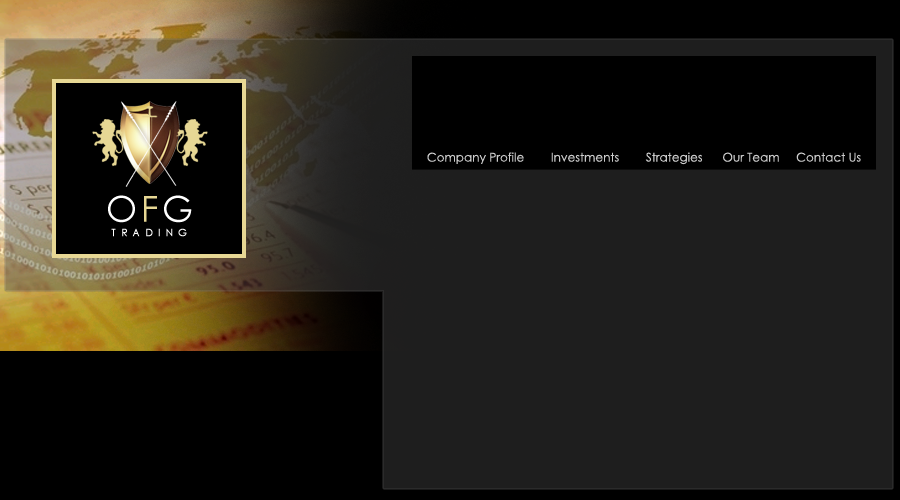
<style>
.page{position:relative;width:900px;height:500px;background:#1e1e1e}
.page>*{position:absolute;margin:0}
.t1{font:12px "CenturyGothic";color:#cccccc}
.t2{font:36px "CenturyGothic";letter-spacing:0.1em;color:#ffffff}
.t3{font:36px "CenturyGothic";letter-spacing:0.1em;color:#e7d794}
.t4{font:10px "CenturyGothic";letter-spacing:0.5em;color:#ffffff;font-weight:bold}
</style>
<div class="page">
<p class="t1" style="left:427px;top:152px;width:434px;height:13px">Company Profile        Investments        Strategies      Our Team     Contact Us</p>
<p class="t2" style="left:108px;top:195px;width:84px;height:28px">O<span class="t3">F</span>G</p>
<p class="t4" style="left:111px;top:228px;width:76px;height:9px">TRADING</p>
</div>
